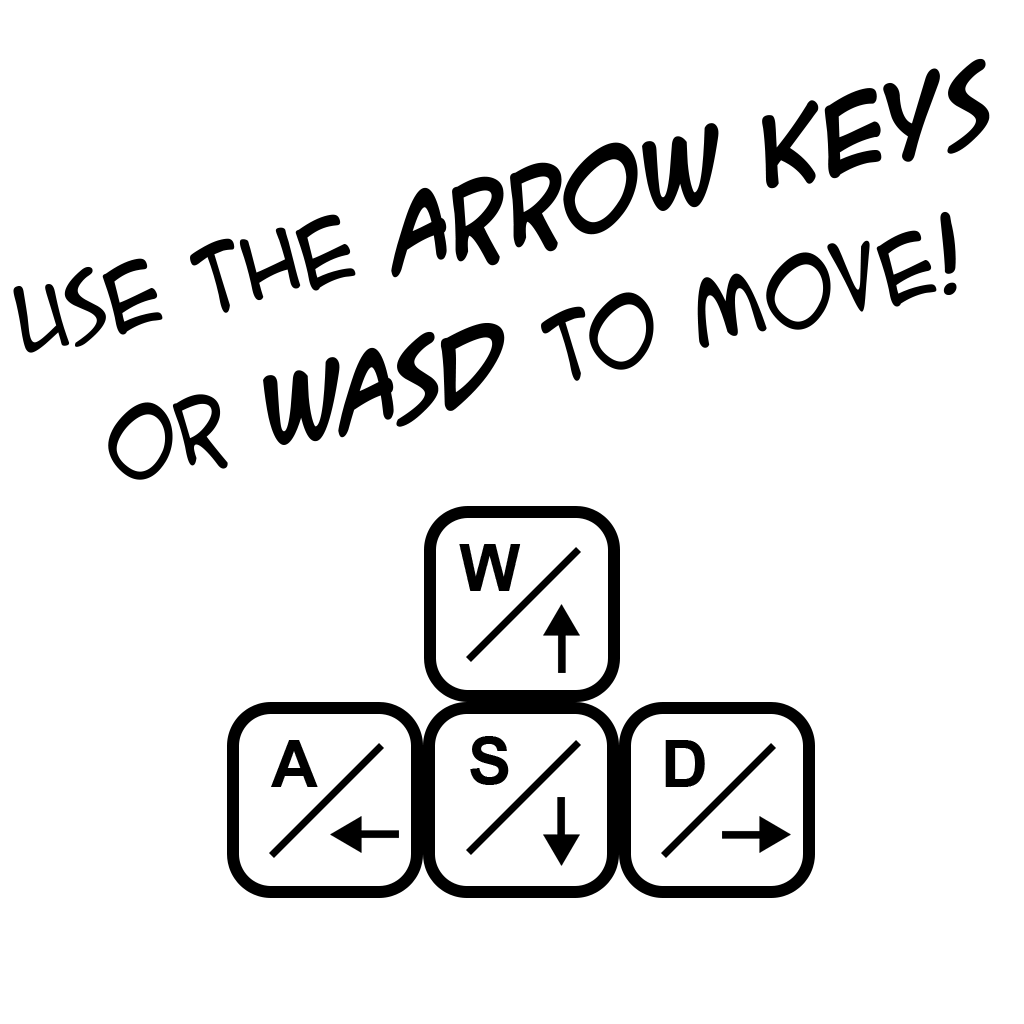
<style>
.page{position:relative;width:1024px;height:1024px;background:#ffffff}
.page>*{position:absolute;margin:0}
.t1{font:120px "ACMESecretAgentBB-BoldItalic";color:#000000}
.t2{font:120px "ACMESecretAgentBB";color:#000000}
.t3{font:64.9px "Arial-BoldMT";color:#000000}
</style>
<div class="page">
<p class="t1" style="left:13px;top:58px;width:977px;height:422px;text-align:center;rotate:-13deg"><span class="t2">Use the </span>arrow keys<br><span class="t2">or </span>WASD <span class="t2">to move!</span></p>
<p class="t3" style="left:459px;top:544px;width:62px;height:47px">W</p>
<p class="t3" style="left:470px;top:736px;width:39px;height:49px">S</p>
<p class="t3" style="left:271px;top:740px;width:47px;height:47px">A</p>
<p class="t3" style="left:665px;top:740px;width:40px;height:47px">D</p>
</div>
